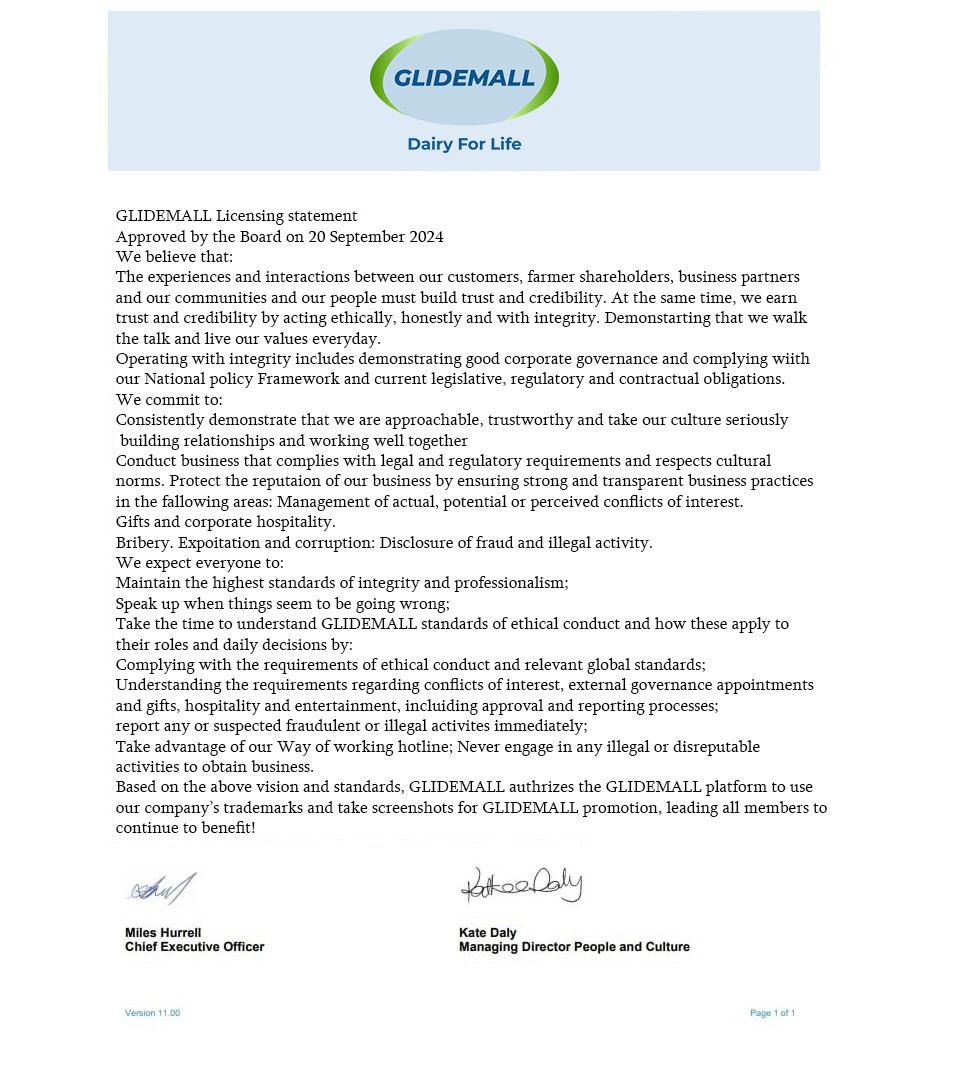
<style>
.page{position:relative;width:975px;height:1080px;background:#ffffff}
.page>*{position:absolute;margin:0}
.t1{font:17px "Sylfaen";color:#000000}
</style>
<div class="page">
<p class="t1" style="left:115px;top:210px;width:712px;height:623px">GLIDEMALL Licensing statement<br>Approved by the Board on 20 September 2024<br>We believe that:<br>The experiences and interactions between our customers, farmer shareholders, business partners <br>and our communities and our people must build trust and credibility. At the same time, we earn <br>trust and credibility by acting ethically, honestly and with integrity. Demonstarting that we walk <br>the talk and live our values everyday.<br>Operating with integrity includes demonstrating good corporate governance and complying wiith<br>our National policy Framework and current legislative, regulatory and contractual obligations.<br>We commit to:<br>Consistently demonstrate that we are approachable, trustworthy and take our culture seriously<br> building relationships and working well together<br>Conduct business that complies with legal and regulatory requirements and respects cultural <br>norms. Protect the reputaion of our business by ensuring strong and transparent business practices <br>in the fallowing areas: Management of actual, potential or perceived conflicts of interest.<br>Gifts and corporate hospitality.<br>Bribery. Expoitation and corruption: Disclosure of fraud and illegal activity.<br>We expect everyone to:<br>Maintain the highest standards of integrity and professionalism;<br>Speak up when things seem to be going wrong;<br>Take the time to understand GLIDEMALL standards of ethical conduct and how these apply to <br>their roles and daily decisions by:<br>Complying with the requirements of ethical conduct and relevant global standards;<br>Understanding the requirements regarding conflicts of interest, external governance appointments <br>and gifts, hospitality and entertainment, incluiding approval and reporting processes;<br>report any or suspected fraudulent or illegal activites immediately;<br>Take advantage of our Way of working hotline; Never engage in any illegal or disreputable<br>activities to obtain business.<br>Based on the above vision and standards, GLIDEMALL authrizes the GLIDEMALL platform to use <br>our company’s trademarks and take screenshots for GLIDEMALL promotion, leading all members to <br>continue to benefit!</p>
</div>
